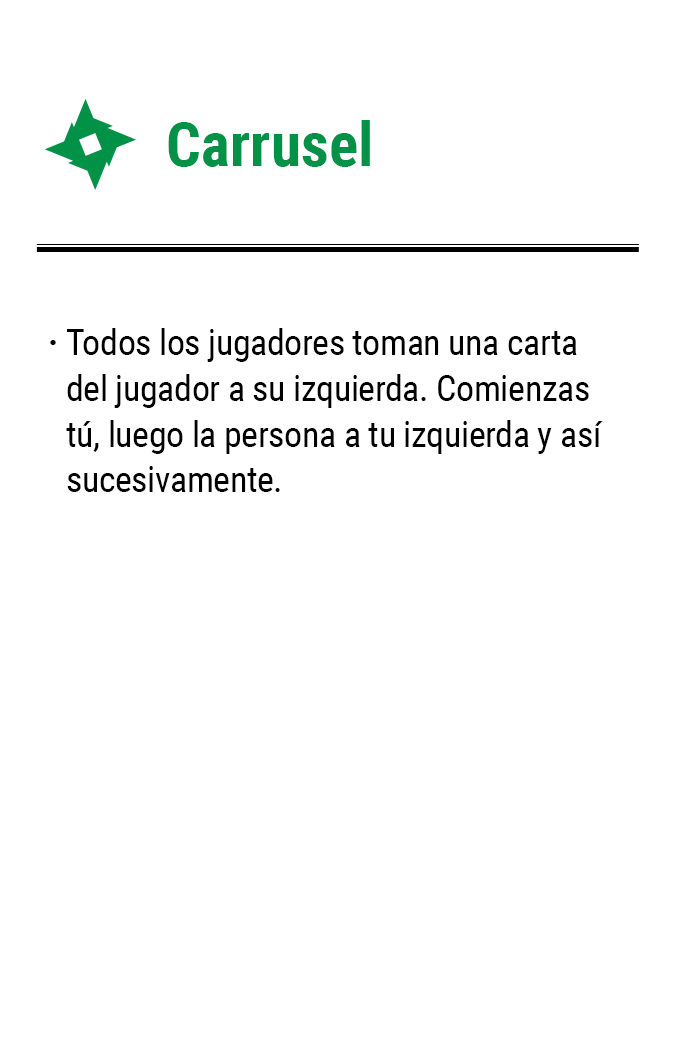
<style>
.page{position:relative;width:675px;height:1050px;background:#ffffff}
.page>*{position:absolute;margin:0}
.t1{font:61.2px "RobotoCondensed-Bold";color:#019147}
.t2{font:35.8px/45.8px "RobotoCondensed-Regular";letter-spacing:-0.01em;color:#000000}
.t3{font:35.8px "RobotoCondensed-Bold";letter-spacing:-0.01em;color:#000000}
</style>
<div class="page">
<p class="t1" style="left:168px;top:120px;width:202px;height:47px">Carrusel</p>
<p class="t2" style="left:66px;top:328px;width:537px;height:164px">Todos los jugadores toman una carta del jugador a su izquierda. Comienzas tú, luego la persona a tu izquierda y así sucesivamente.</p>
<p class="t3" style="left:50px;top:340px;width:6px;height:5px">·</p>
</div>
